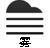
<style>
.page{position:relative;width:50px;height:48px;background:#ffffff}
.page>*{position:absolute;margin:0}
.t1{font:12px "OPPOSans-R";color:#000000}
</style>
<div class="page">
<p class="t1" style="left:19px;top:37px;width:12px;height:10px">雾</p>
</div>
